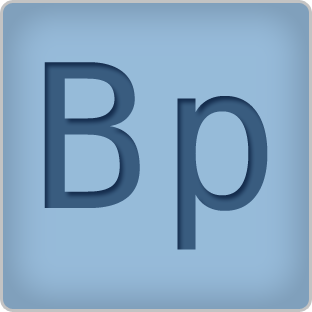
<style>
.page{position:relative;width:312px;height:312px;background:#96bbd9}
.page>*{position:absolute;margin:0}
.t1{font:200px "Menlo-Regular";letter-spacing:0.05em;color:#395d80}
</style>
<div class="page">
<p class="t1" style="left:44px;top:62px;width:224px;height:188px">Bp</p>
</div>
